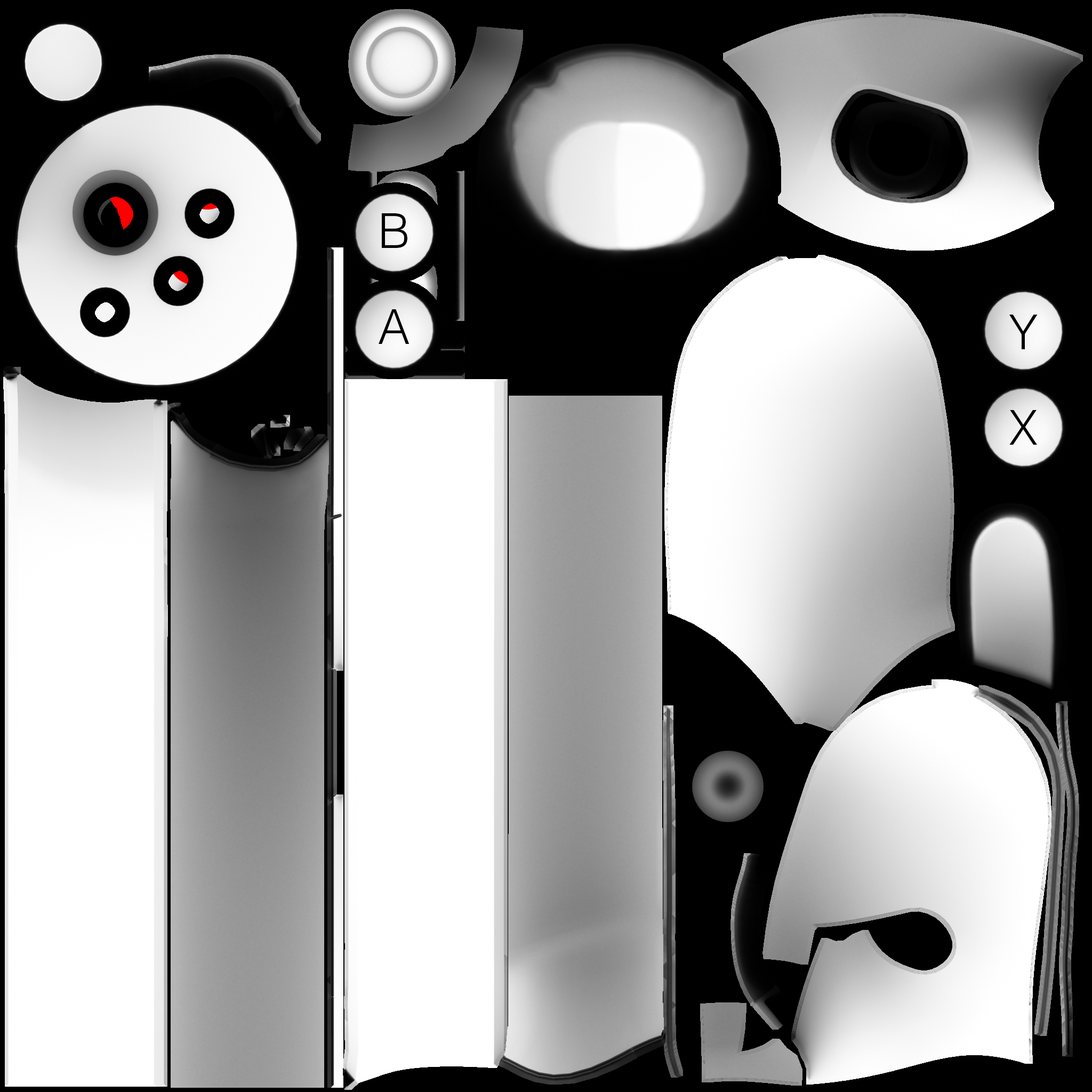
<style>
.page{position:relative;width:1092px;height:1092px;background:#000000}
.page>*{position:absolute;margin:0}
.t1{font:48px "Helvetica-Light";letter-spacing:0.1em;color:#000000}
</style>
<div class="page">
<p class="t1" style="left:382px;top:213px;width:25px;height:35px">B</p>
<p class="t1" style="left:379px;top:309px;width:30px;height:35px">A</p>
<p class="t1" style="left:1009px;top:315px;width:29px;height:34px">Y</p>
<p class="t1" style="left:1009px;top:410px;width:28px;height:35px">X</p>
</div>
